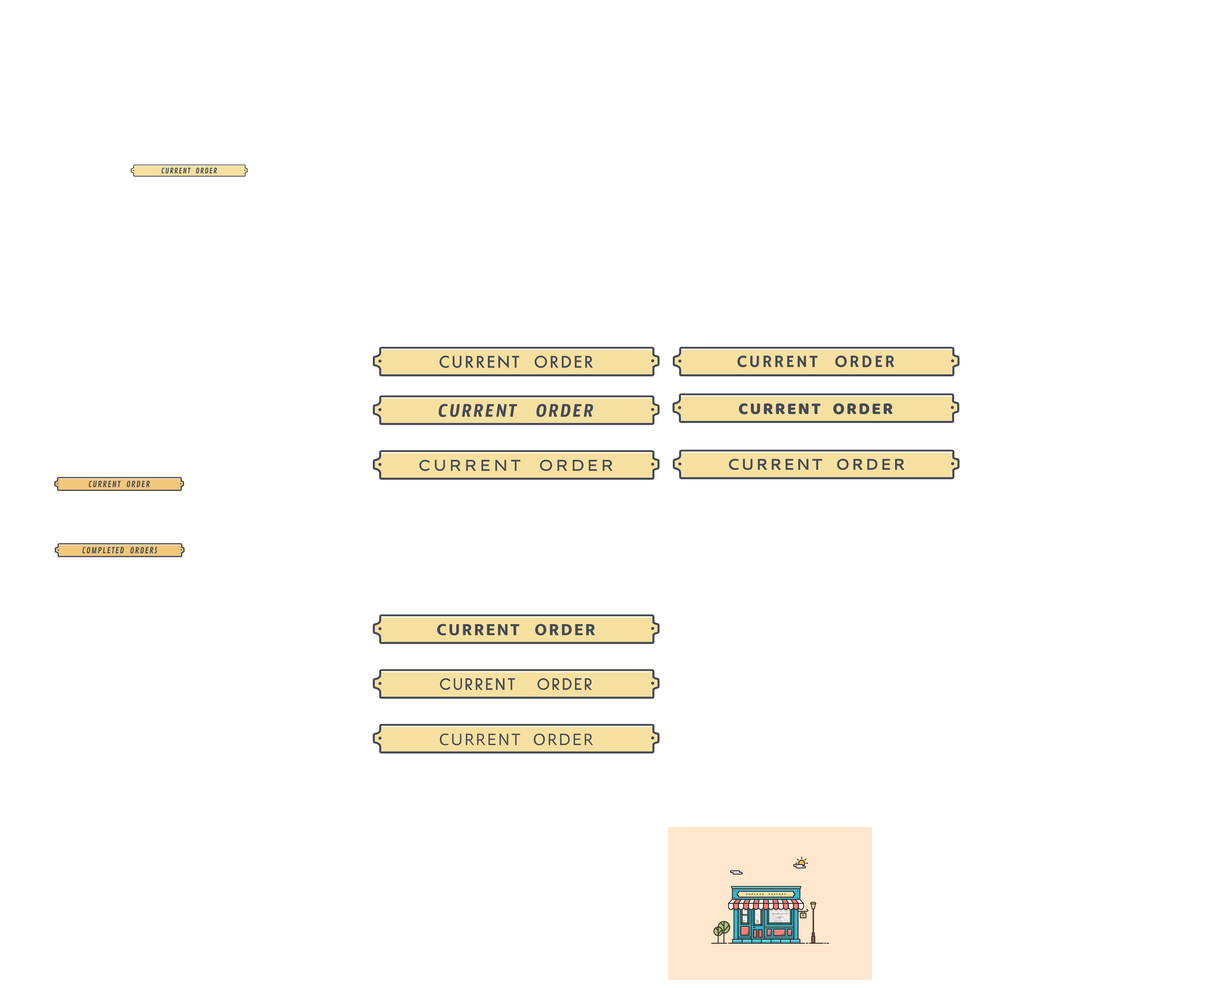
<style>
.page{position:relative;width:1206px;height:988px;background:#ffffff}
.page>*{position:absolute;margin:0}
.t1{font:15.7px "Futura-Medium";letter-spacing:0.1em;color:#444a55}
.t2{font:17.3px "HammersmithOne-Regular";letter-spacing:0.1em;color:#444a55}
.t3{font:20.8px "Timmana";letter-spacing:0.07em;color:#444a55}
.t4{font:17px "BalooBhaina-Regular";letter-spacing:0.1em;color:#444a55}
.t5{font:15.7px "LexendGiga-Regular";letter-spacing:0.1em;color:#444a55}
.t6{font:15.7px "Cantarell-Bold";letter-spacing:0.1em;color:#444a55}
.t7{font:8.2px "ContrailOne-Regular";letter-spacing:0.1em;color:#444a55}
.t8{font:17.6px "MuktaMalar-ExtraBold";letter-spacing:0.1em;color:#444a55}
.t9{font:17.6px "SulphurPoint-Bold";letter-spacing:0.1em;color:#444a55}
.t10{font:16.7px "Actor-Regular";letter-spacing:0.1em;color:#444a55}
</style>
<div class="page">
<p class="t1" style="left:440px;top:355px;width:153px;height:14px">CURRENT  ORDER</p>
<p class="t2" style="left:738px;top:356px;width:157px;height:11px">CURRENT  ORDER</p>
<p class="t3" style="left:439px;top:404px;width:154px;height:13px">CURRENT  ORDER</p>
<p class="t4" style="left:739px;top:403px;width:154px;height:11px">CURRENT  ORDER</p>
<p class="t5" style="left:419px;top:460px;width:194px;height:11px">CURRENT  ORDER</p>
<p class="t6" style="left:729px;top:459px;width:176px;height:11px">CURRENT  ORDER</p>
<p class="t7" style="left:89px;top:481px;width:61px;height:7px">CURRENT  ORDER</p>
<p class="t7" style="left:83px;top:547px;width:74px;height:7px">COMPLETED  ORDERS</p>
<p class="t8" style="left:437px;top:624px;width:158px;height:12px">CURRENT  ORDER</p>
<p class="t9" style="left:440px;top:678px;width:152px;height:12px">CURRENT  ORDER</p>
<p class="t10" style="left:440px;top:734px;width:153px;height:12px">CURRENT  ORDER</p>
</div>
